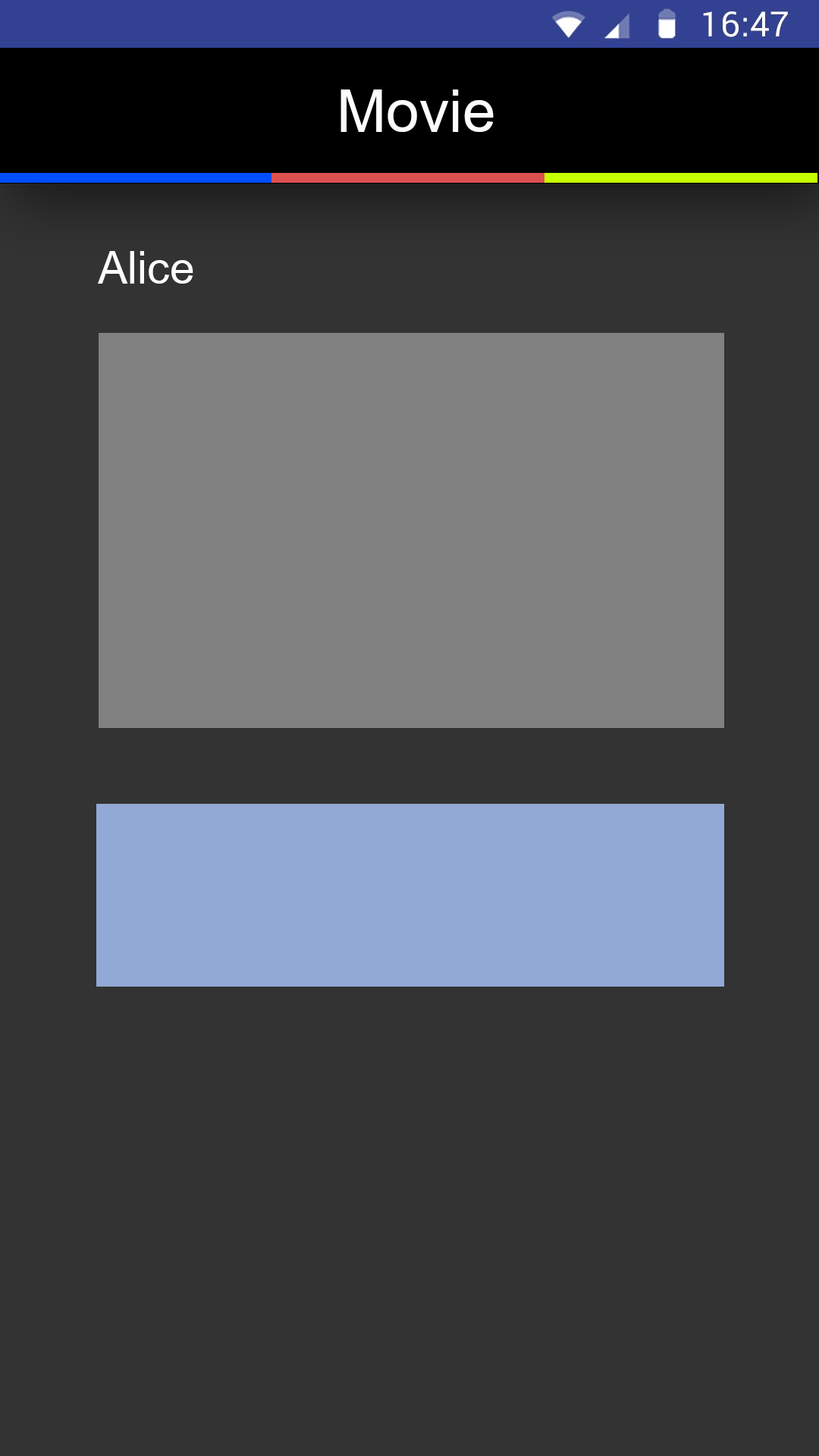
<style>
.page{position:relative;width:819px;height:1456px;background:#333333}
.page>*{position:absolute;margin:0}
.t1{font:91px "BrowalliaNew";color:#fefbfb}
.t2{font:68.2px "BrowalliaNew";color:#fefefe}
</style>
<div class="page">
<p class="t1" style="left:340px;top:89px;width:154px;height:43px">Movie</p>
<p class="t2" style="left:98px;top:251px;width:95px;height:33px">Alice</p>
</div>
